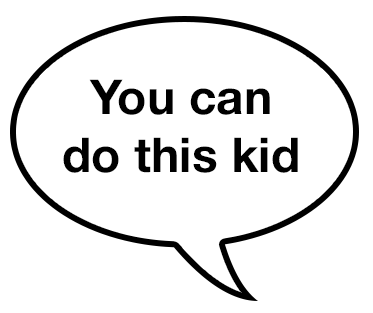
<style>
.page{position:relative;width:373px;height:313px;background:#ffffff}
.page>*{position:absolute;margin:0}
.t1{font:48px "HelveticaNeue-Bold";color:#000000}
</style>
<div class="page">
<p class="t1" style="left:63px;top:79px;width:235px;height:94px;text-align:center">You can<br>do this kid</p>
</div>
